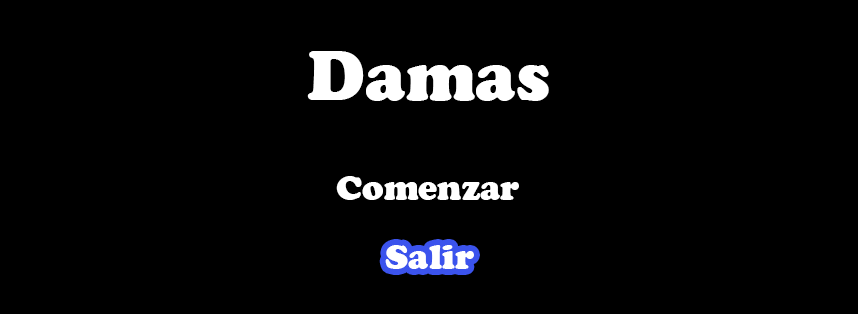
<style>
.page{position:relative;width:858px;height:314px;background:#000000}
.page>*{position:absolute;margin:0}
.t1{font:72px "CooperBlack";color:#ffffff}
.t2{font:36px "CooperBlack";color:#ffffff}
</style>
<div class="page">
<p class="t1" style="left:307px;top:51px;width:242px;height:50px">Damas</p>
<p class="t2" style="left:336px;top:176px;width:183px;height:24px">Comenzar</p>
<p class="t2" style="left:385px;top:245px;width:89px;height:24px">Salir</p>
</div>
